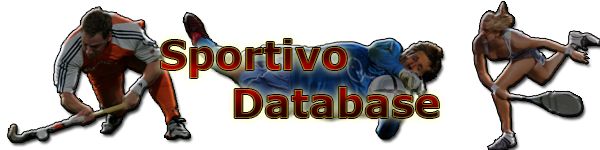
<style>
.page{position:relative;width:600px;height:150px;background:#ffffff}
.page>*{position:absolute;margin:0}
.t1{font:40px "Verdana-Bold"}
</style>
<div class="page">
<p class="t1" style="left:161px;top:39px;width:278px;height:79px">Sportivo<br>  Database</p>
</div>
